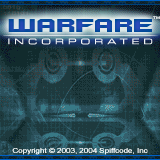
<style>
.page{position:relative;width:160px;height:160px;background:#1e3a3e}
.page>*{position:absolute;margin:0}
.t1{font:3.4px "Small Fonts";scale:1.18 1}
.t2{font:20px "Quadrangle";color:#004997}
.t3{font:7.6px "Eurostile-ExtendedTwo";letter-spacing:0.45em;color:#ffffff;scale:1.18 1}
.t4{font:6.8px "ArialMT";color:#ffffff;scale:1.18 1}
</style>
<div class="page">
<p class="t1" style="left:153px;top:16px;width:7px;height:3px">TM</p>
<p class="t2" style="left:8px;top:19px;width:144px;height:13px">WARFARE</p>
<p class="t3" style="left:8px;top:38px;width:145px;height:7px;opacity:0.95">INCORPORATED</p>
<p class="t4" style="left:12px;top:148px;width:136px;height:7px;opacity:0.9">Copyright © 2003, 2004 Spiffcode, Inc</p>
</div>
